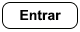
<style>
.page{position:relative;width:80px;height:32px;background:#ffffff}
.page>*{position:absolute;margin:0}
.t1{font:13.9px "Arial-BoldMT";color:#000000}
</style>
<div class="page">
<p class="t1" style="left:20px;top:10px;width:41px;height:11px">Entrar</p>
</div>
